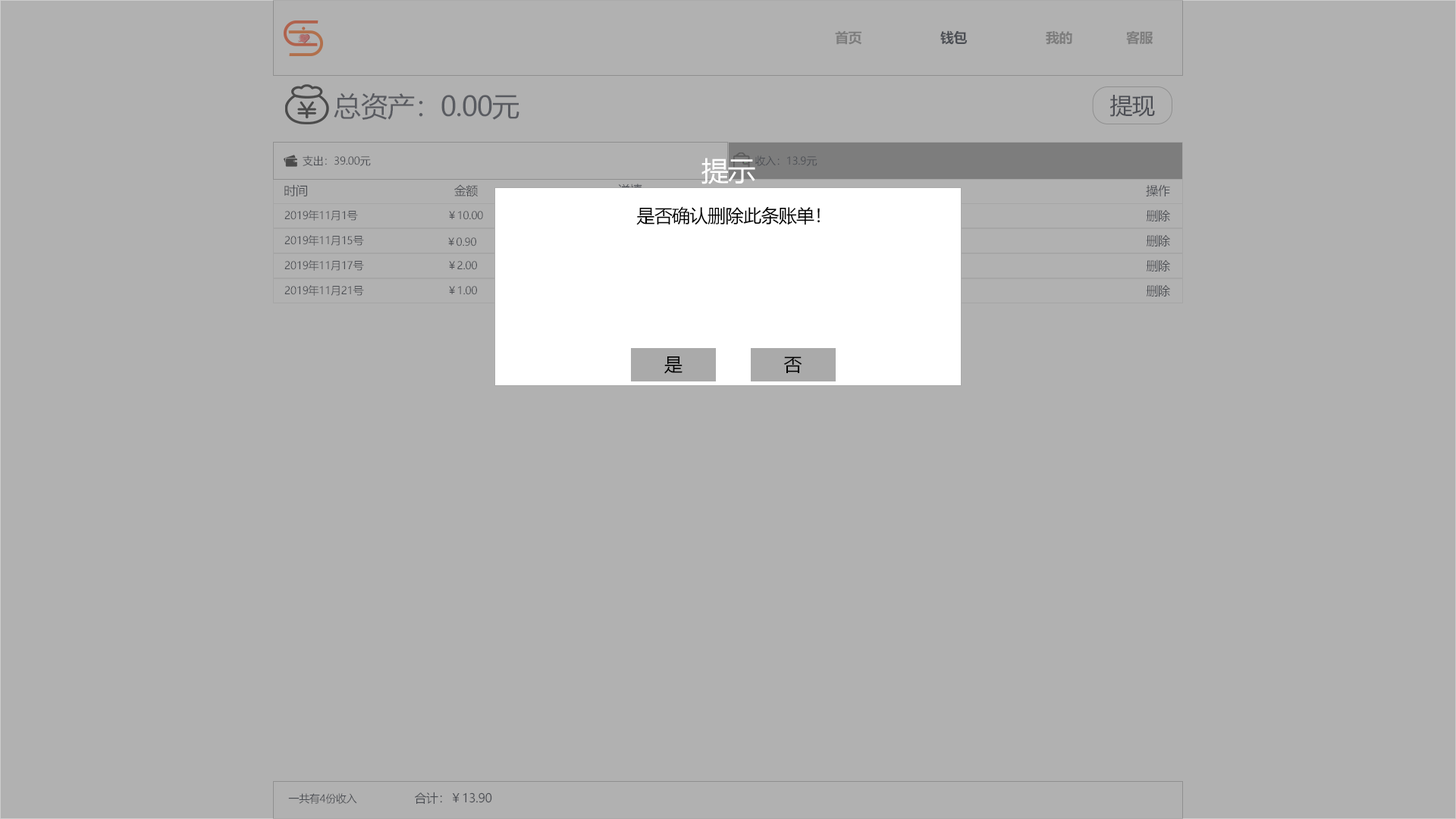
<style>
.page{position:relative;width:1456px;height:819px;background:#b1b1b1}
.page>*{position:absolute;margin:0}
.t1{font:13.6px "MicrosoftYaHei-Bold";letter-spacing:-0.024em;color:#7d7d7d}
.t2{font:13.6px "MicrosoftYaHei-Bold";letter-spacing:-0.024em;color:#4b4e54}
.t3{font:27.3px "MicrosoftYaHei";letter-spacing:-0.024em;color:#595b61}
.t4{font:22.7px "MicrosoftYaHei";letter-spacing:-0.024em;color:#4c4e55}
.t5{font:10.6px "MicrosoftYaHei";letter-spacing:-0.024em;color:#4b4e54}
.t6{font:27.3px "MicrosoftYaHei";letter-spacing:-0.024em;color:#ffffff}
.t7{font:12.1px "MicrosoftYaHei";letter-spacing:-0.024em;color:#4b4e54}
.t8{font:18.2px "MicrosoftYaHei";letter-spacing:-0.024em;color:#000000}
</style>
<div class="page">
<p class="t1" style="left:835px;top:30px;width:26px;height:15px">首页</p>
<p class="t2" style="left:940px;top:30px;width:28px;height:15px">钱包</p>
<p class="t1" style="left:1046px;top:31px;width:26px;height:14px">我的</p>
<p class="t1" style="left:1126px;top:31px;width:27px;height:14px">客服</p>
<p class="t3" style="left:334px;top:93px;width:185px;height:27px">总资产：0.00元</p>
<p class="t4" style="left:1110px;top:95px;width:45px;height:22px">提现</p>
<p class="t5" style="left:303px;top:155px;width:68px;height:11px">支出：39.00元</p>
<p class="t6" style="left:701px;top:158px;width:54px;height:26px">提示</p>
<p class="t5" style="left:755px;top:155px;width:62px;height:11px">收入：13.9元</p>
<p class="t7" style="left:284px;top:184px;width:23px;height:12px">时间</p>
<p class="t7" style="left:454px;top:184px;width:24px;height:13px">金额</p>
<p class="t7" style="left:1146px;top:184px;width:24px;height:13px">操作</p>
<p class="t8" style="left:636px;top:206px;width:184px;height:19px">是否确认删除此条账单！</p>
<p class="t7" style="left:1146px;top:209px;width:24px;height:13px">删除</p>
<p class="t5" style="left:284px;top:210px;width:74px;height:11px">2019年11月1号</p>
<p class="t5" style="left:449px;top:211px;width:34px;height:9px">￥10.00</p>
<p class="t5" style="left:284px;top:235px;width:80px;height:11px">2019年11月15号</p>
<p class="t5" style="left:448px;top:237px;width:28px;height:9px">￥0.90</p>
<p class="t7" style="left:1146px;top:234px;width:24px;height:13px">删除</p>
<p class="t5" style="left:284px;top:260px;width:80px;height:11px">2019年11月17号</p>
<p class="t5" style="left:449px;top:261px;width:28px;height:9px">￥2.00</p>
<p class="t7" style="left:1146px;top:259px;width:24px;height:13px">删除</p>
<p class="t5" style="left:284px;top:285px;width:80px;height:11px">2019年11月21号</p>
<p class="t5" style="left:449px;top:286px;width:28px;height:9px">￥1.00</p>
<p class="t7" style="left:1146px;top:284px;width:24px;height:13px">删除</p>
<p class="t8" style="left:664px;top:356px;width:18px;height:18px">是</p>
<p class="t8" style="left:783px;top:356px;width:19px;height:17px">否</p>
<p class="t5" style="left:288px;top:793px;width:69px;height:11px">一共有4份收入</p>
<p class="t7" style="left:414px;top:792px;width:78px;height:12px">合计：￥13.90</p>
</div>
